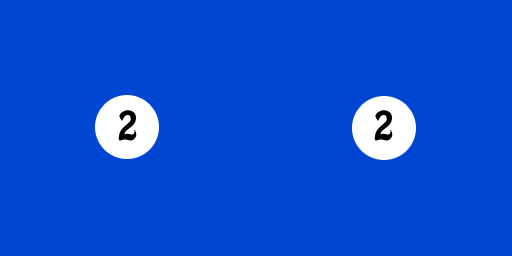
<style>
.page{position:relative;width:512px;height:256px;background:#0046d3}
.page>*{position:absolute;margin:0}
.t1{font:36px "HoboStd";color:#000000}
</style>
<div class="page">
<p class="t1" style="left:118px;top:110px;width:19px;height:31px">2</p>
<p class="t1" style="left:374px;top:110px;width:19px;height:31px">2</p>
</div>
